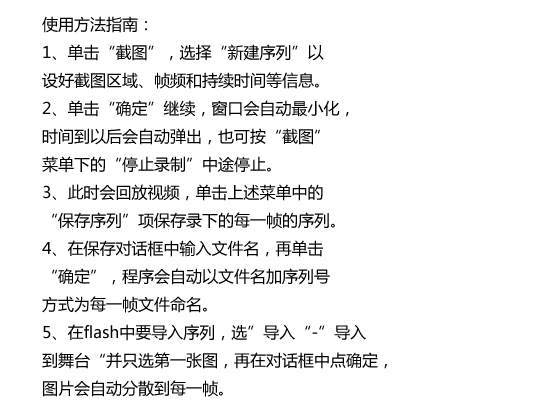
<style>
.page{position:relative;width:550px;height:400px;background:#ffffff}
.page>*{position:absolute;margin:0}
.t1{font:16px "MicrosoftYaHei";color:#000000}
</style>
<div class="page">
<p class="t1" style="left:42px;top:16px;width:345px;height:381px">使用方法指南：<br>1、单击“截图”，选择“新建序列”以<br>设好截图区域、帧频和持续时间等信息。<br>2、单击“确定”继续，窗口会自动最小化，<br>时间到以后会自动弹出，也可按“截图”<br>菜单下的“停止录制”中途停止。<br>3、此时会回放视频，单击上述菜单中的<br>“保存序列”项保存录下的每一帧的序列。<br>4、在保存对话框中输入文件名，再单击<br>“确定”，程序会自动以文件名加序列号<br>方式为每一帧文件命名。<br>5、在flash中要导入序列，选”导入“-”导入<br>到舞台“并只选第一张图，再在对话框中点确定，<br>图片会自动分散到每一帧。</p>
</div>
